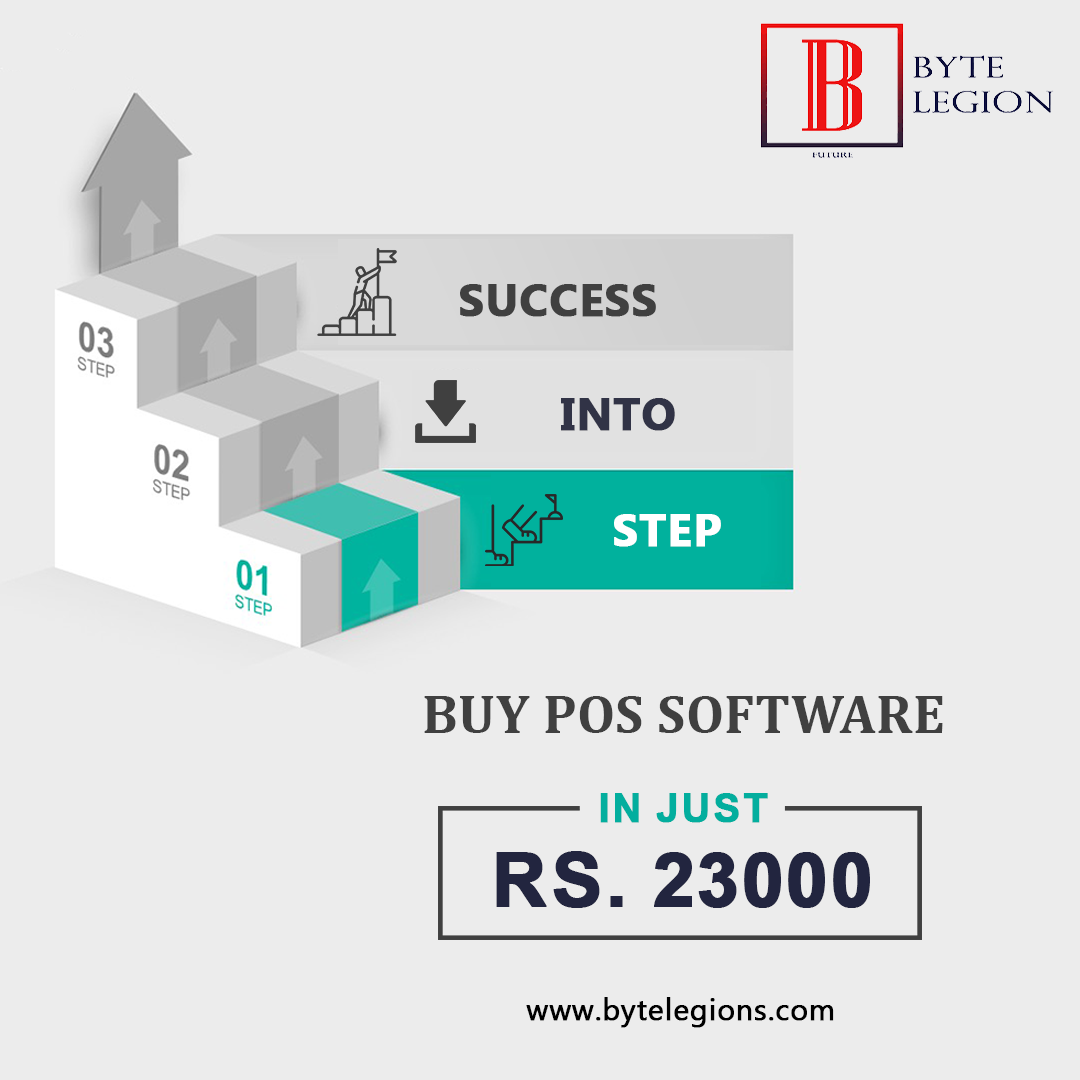
<style>
.page{position:relative;width:1080px;height:1080px;background:#ececec}
.page>*{position:absolute;margin:0}
.t1{font:45px "MyanmarText-Bold";letter-spacing:0.01em;color:#404040;text-transform:uppercase;font-weight:bold}
.t2{font:45px "MyanmarText-Bold";letter-spacing:0.01em;color:#313346;text-transform:uppercase;font-weight:bold}
.t3{font:45px "MyanmarText-Bold";letter-spacing:0.01em;color:#ffffff;text-transform:uppercase;font-weight:bold}
.t4{font:55px "Cambria-Bold";letter-spacing:0.01em;color:#404040;text-transform:uppercase}
.t5{font:40px "Arial-BoldMT";letter-spacing:0.01em;color:#03ae9e;text-transform:uppercase;font-weight:bold}
.t6{font:75px "Arial-BoldMT";letter-spacing:0.01em;color:#22253f;text-transform:uppercase;font-weight:bold}
.t7{font:30px "MyanmarText";letter-spacing:0.01em;color:#000000;font-weight:bold}
</style>
<div class="page">
<p class="t1" style="left:460px;top:284px;width:196px;height:33px">Success</p>
<p class="t2" style="left:561px;top:398px;width:114px;height:33px">into</p>
<p class="t3" style="left:614px;top:514px;width:107px;height:33px">Step</p>
<p class="t4" style="left:424px;top:696px;width:519px;height:37px">Buy POS Software</p>
<p class="t5" style="left:600px;top:793px;width:168px;height:30px">In Just</p>
<p class="t6" style="left:496px;top:851px;width:374px;height:57px">Rs. 23000</p>
<p class="t7" style="left:526px;top:997px;width:308px;height:31px">www.bytelegions.com</p>
</div>
